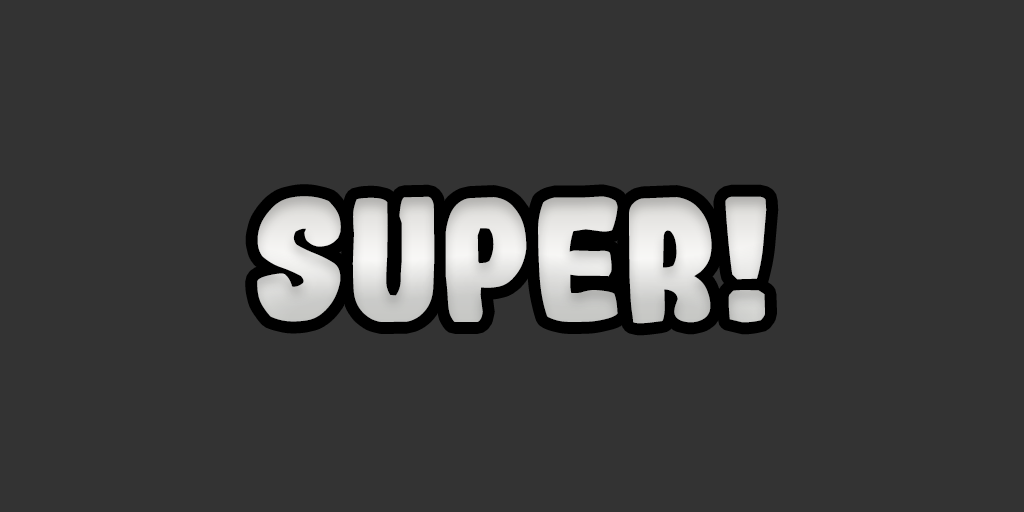
<style>
.page{position:relative;width:1024px;height:512px;background:#333333}
.page>*{position:absolute;margin:0}
.t1{font:166.7px "Gogono-Cocoa-Mochi"}
</style>
<div class="page">
<p class="t1" style="left:257px;top:196px;width:510px;height:128px">SUPER!</p>
</div>
